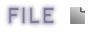
<style>
.page{position:relative;width:96px;height:32px;background:#ffffff}
.page>*{position:absolute;margin:0}
.t1{font:24px "ElyRounded-Heavy";letter-spacing:0.025em}
</style>
<div class="page">
<p class="t1" style="left:8px;top:7px;width:47px;height:17px">FILE</p>
</div>
